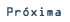
<style>
.page{position:relative;width:70px;height:22px;background:#ffffff}
.page>*{position:absolute;margin:0}
.t1{font:11.1px "OCRAStd";color:#264b65}
</style>
<div class="page">
<p class="t1" style="left:7px;top:7px;width:54px;height:9px">Próxima</p>
</div>
